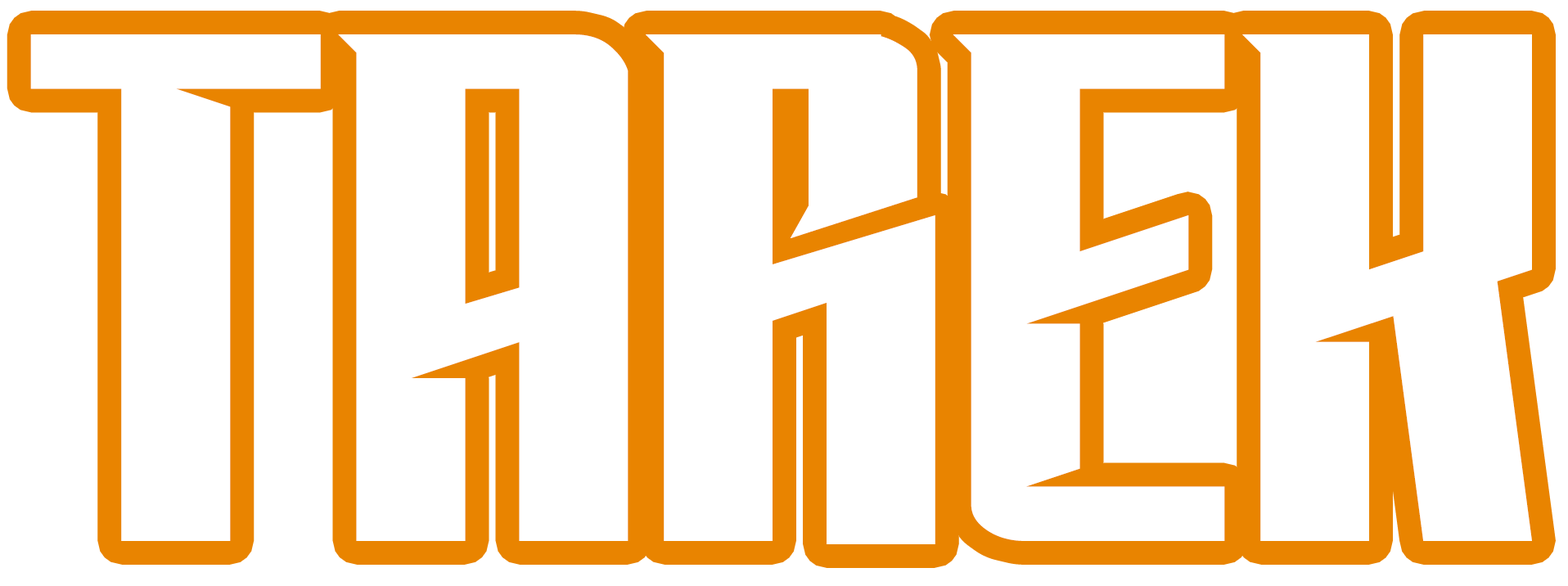
<style>
.page{position:relative;width:1568px;height:586px;background:#ffffff}
.page>*{position:absolute;margin:0}
.t1{font:740.6px "Subspace";color:#ffffff}
</style>
<div class="page">
<p class="t1" style="left:30px;top:34px;width:1502px;height:510px">TAREK</p>
</div>
